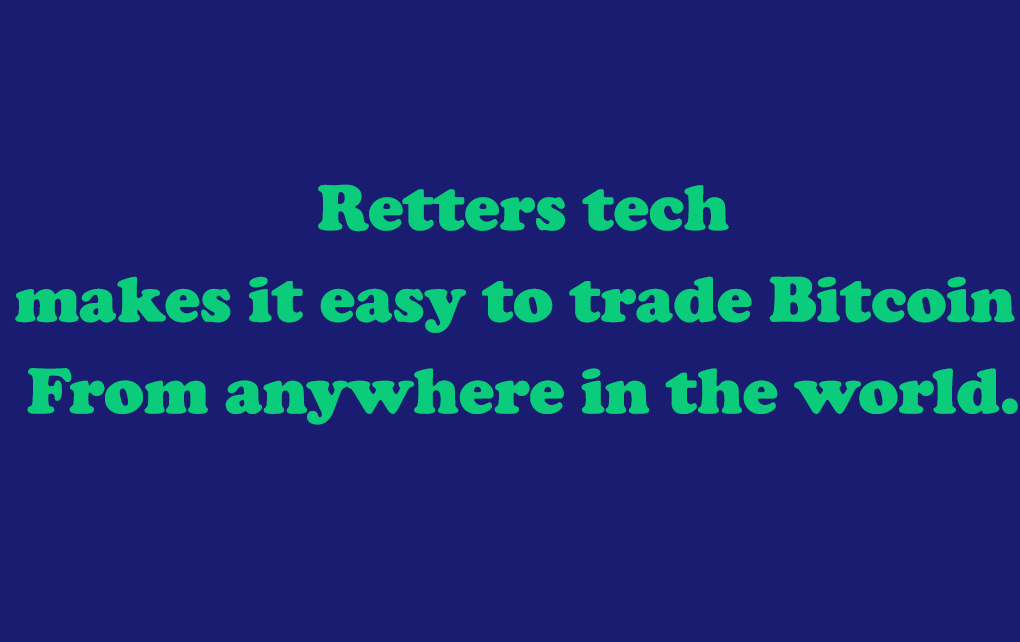
<style>
.page{position:relative;width:1020px;height:642px;background:#1a1c72}
.page>*{position:absolute;margin:0}
.t1{font:66.7px/91.7px "CooperBlack";color:#0acc7b}
</style>
<div class="page">
<p class="t1" style="left:15px;top:184px;width:1003px;height:241px;text-align:center">Retters tech<br>makes it easy to trade Bitcoin <br>From anywhere in the world.</p>
</div>
